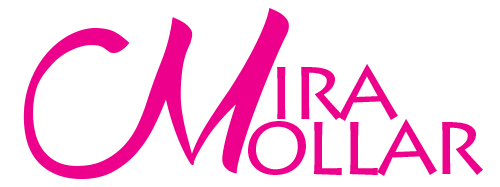
<style>
.page{position:relative;width:500px;height:187px;background:#ffffff}
.page>*{position:absolute;margin:0}
.t1{font:600px "WolfintheCity";letter-spacing:-0.075em;color:#ec008c}
.t2{font:150px "LithosPro-Regular";letter-spacing:-0.075em;color:#ec008c}
</style>
<div class="page">
<p class="t1" style="left:23px;top:8px;width:266px;height:171px">M</p>
<p class="t2" style="left:277px;top:64px;width:121px;height:57px">ira</p>
<p class="t2" style="left:248px;top:119px;width:235px;height:57px">ollar</p>
</div>
